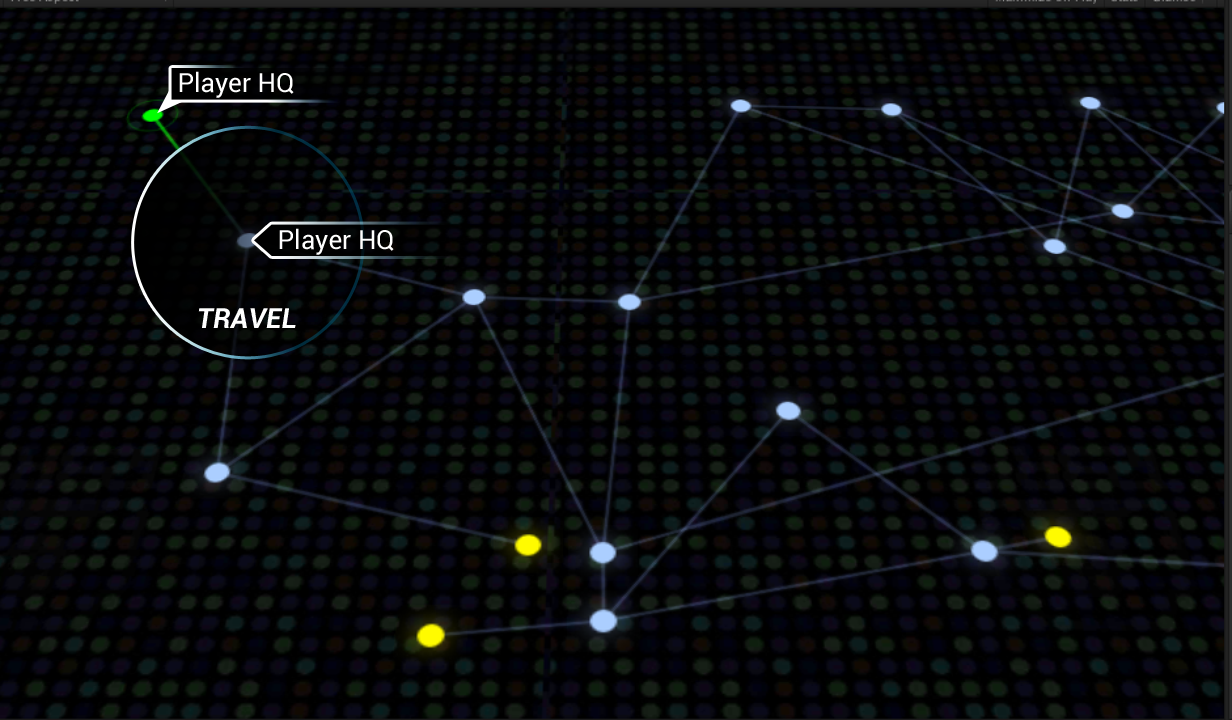
<style>
.page{position:relative;width:1232px;height:720px}
.page>*{position:absolute;margin:0}
.t1{font:26.2px "Roboto-Regular";color:#ffffff}
.t2{font:27.9px "Roboto-BoldItalic";color:#ffffff}
</style>
<div class="page">
<p class="t1" style="left:179px;top:71px;width:115px;height:27px">Player HQ</p>
<p class="t1" style="left:279px;top:228px;width:115px;height:27px">Player HQ</p>
<p class="t2" style="left:198px;top:308px;width:98px;height:20px">TRAVEL</p>
</div>
